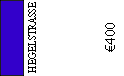
<style>
.page{position:relative;width:124px;height:76px;background:#ffffff}
.page>*{position:absolute;margin:0}
.t1{font:12px "AdobeDevanagari-Regular";color:#000000;scale:0.9 1}
.t2{font:14px "MyriadPro-Regular";color:#000000}
</style>
<div class="page">
<p class="t1" style="left:28px;top:2px;width:8px;height:71px;rotate:-90deg">HEGELSTRASSE</p>
<p class="t2" style="left:105px;top:23px;width:10px;height:29px;rotate:-90deg">€400</p>
</div>
